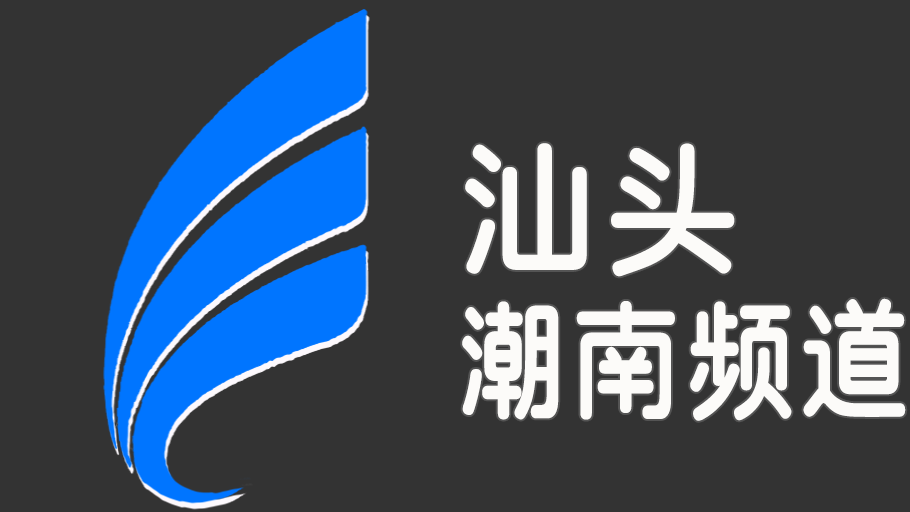
<style>
.page{position:relative;width:910px;height:512px;background:#333333}
.page>*{position:absolute;margin:0}
.t1{font:132px/160px "SJyuantijian-C-Regular";letter-spacing:0.02em;color:#fcfbf9;scale:0.85 1}
.t2{font:150px/160px "SJyuantijian-C-Regular";letter-spacing:0.02em;color:#fcfbf9;scale:0.95 1}
</style>
<div class="page">
<p class="t1" style="left:462px;top:143px;width:444px;height:278px"><span class="t2">汕头<br></span>潮南频道</p>
</div>
